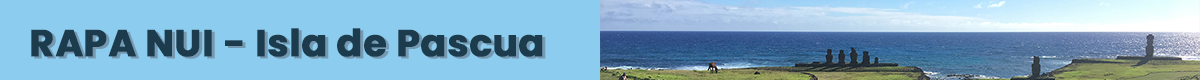
<style>
.page{position:relative;width:1200px;height:80px;background:#8cccee}
.page>*{position:absolute;margin:0}
.t1{font:37.5px "Poppins-Bold";color:#1c3c4d;font-weight:bold}
</style>
<div class="page">
<p class="t1" style="left:31px;top:28px;width:512px;height:29px">RAPA NUI - Isla de Pascua</p>
</div>
